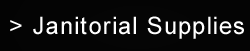
<style>
.page{position:relative;width:250px;height:51px;background:#040404}
.page>*{position:absolute;margin:0}
.t1{font:24px "ArialMT";letter-spacing:0.05em;color:#ffffff}
</style>
<div class="page">
<p class="t1" style="left:10px;top:16px;width:234px;height:23px">&gt; Janitorial Supplies</p>
</div>
